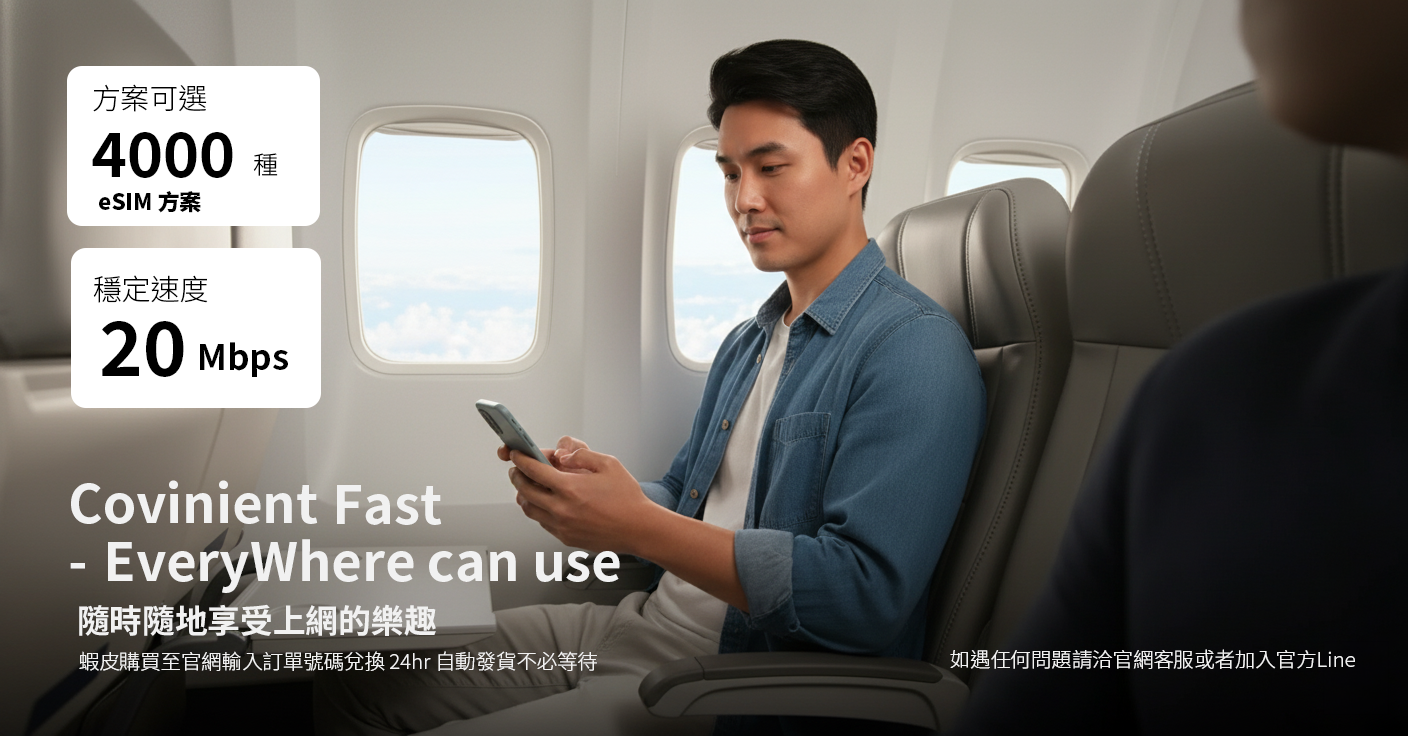
<style>
.page{position:relative;width:1408px;height:736px}
.page>*{position:absolute;margin:0}
.t1{font:28.9px "SourceHanSansTC-Light";color:#000000}
.t2{font:61px "SourceHanSansTC-Bold";color:#000000}
.t3{font:25px "SourceHanSansTC-Light";color:#000000}
.t4{font:22.1px "SourceHanSansTC-Heavy";color:#000000}
.t5{font:74.4px "SourceHanSansTC-Bold";color:#000000}
.t6{font:34.7px "SourceHanSansTC-Bold";color:#000000}
.t7{font:52.6px "SourceHanSansTC-Bold";color:#f1f1f1}
.t8{font:32.7px "SourceHanSansTC-Bold";color:#f1f1f1}
.t9{font:20.4px "SourceHanSansTC-Light";color:#f1f1f1}
</style>
<div class="page">
<p class="t1" style="left:93px;top:84px;width:114px;height:28px">方案可選</p>
<p class="t2" style="left:92px;top:132px;width:141px;height:46px">4000</p>
<p class="t3" style="left:253px;top:153px;width:25px;height:23px">種</p>
<p class="t4" style="left:99px;top:191px;width:102px;height:22px">eSIM 方案</p>
<p class="t1" style="left:93px;top:275px;width:115px;height:28px">穩定速度</p>
<p class="t5" style="left:102px;top:321px;width:82px;height:56px">20</p>
<p class="t6" style="left:200px;top:342px;width:88px;height:35px">Mbps</p>
<p class="t7" style="left:71px;top:480px;width:247px;height:44px">Covinient</p>
<p class="t7" style="left:337px;top:485px;width:105px;height:40px">Fast</p>
<p class="t7" style="left:70px;top:539px;width:550px;height:54px">EveryWhere can use</p>
<p class="t8" style="left:79px;top:604px;width:357px;height:32px">隨時隨地享受上網的樂趣</p>
<p class="t9" style="left:79px;top:651px;width:518px;height:20px">蝦皮購買至官網輸入訂單號碼兌換 24hr 自動發貨不必等待</p>
<p class="t9" style="left:950px;top:649px;width:405px;height:20px">如遇任何問題請洽官網客服或者加入官方Line</p>
</div>
